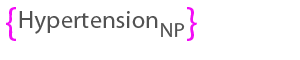
<style>
.page{position:relative;width:300px;height:60px;background:#ffffff}
.page>*{position:absolute;margin:0}
.t1{font:41.7px "MyriadPro-Regular";color:#f30df6}
.t2{font:25px "MyriadPro-Regular";color:#525252}
.t3{font:20.8px "MyriadPro-Regular";color:#525252}
</style>
<div class="page">
<p class="t1" style="left:6px;top:7px;width:10px;height:34px">{</p>
<p class="t2" style="left:19px;top:11px;width:139px;height:23px">Hypertension</p>
<p class="t1" style="left:187px;top:7px;width:10px;height:34px">}</p>
<p class="t3" style="left:161px;top:23px;width:24px;height:14px">NP</p>
</div>
